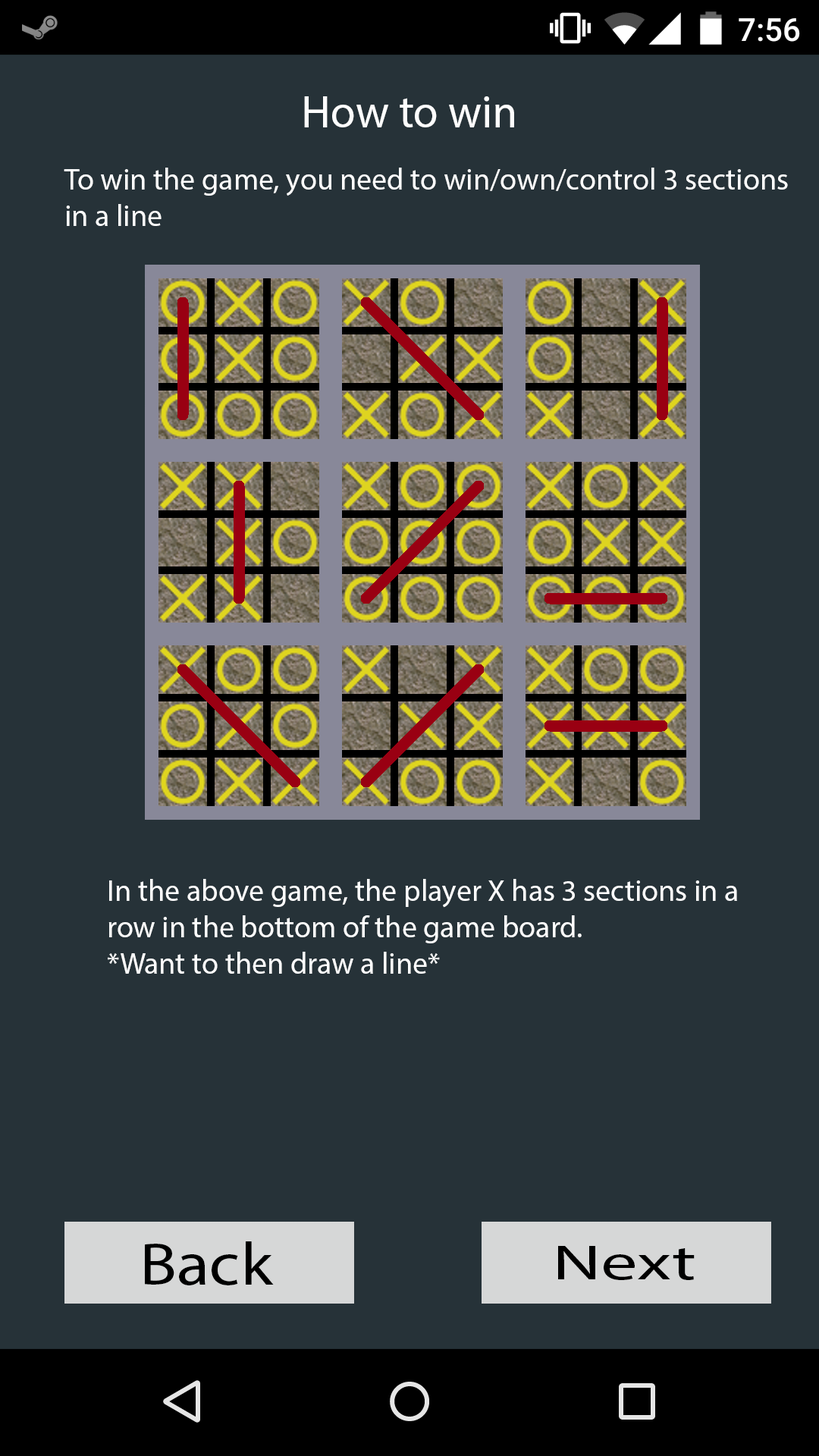
<style>
.page{position:relative;width:819px;height:1456px;background:#263238}
.page>*{position:absolute;margin:0}
.t1{font:45.5px "MyriadPro-Regular";color:#fefefe}
.t2{font:30px "MyriadPro-Regular";color:#fefefe}
.t3{font:30.3px "MyriadPro-Regular";color:#fefefe}
</style>
<div class="page">
<p class="t1" style="left:304px;top:96px;width:210px;height:31px">How to win</p>
<p class="t2" style="left:64px;top:168px;width:724px;height:58px">To win the game, you need to win/own/control 3 sections <br>in a line</p>
<p class="t3" style="left:108px;top:879px;width:629px;height:95px">In the above game, the player X has 3 sections in a <br>row in the bottom of the game board.<br>*Want to then draw a line*</p>
</div>
